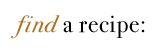
<style>
.page{position:relative;width:158px;height:53px;background:#ffffff}
.page>*{position:absolute;margin:0}
.t1{font:24px "BodoniSvtyTwoITCTTBook";letter-spacing:0.04em;color:#000000}
.t2{font:24px "BodoniSvtyTwoITCTTBookIta";letter-spacing:0.04em;color:#ad7021}
</style>
<div class="page">
<p class="t1" style="left:11px;top:15px;width:134px;height:24px"><span class="t2">find </span>a recipe:</p>
</div>
